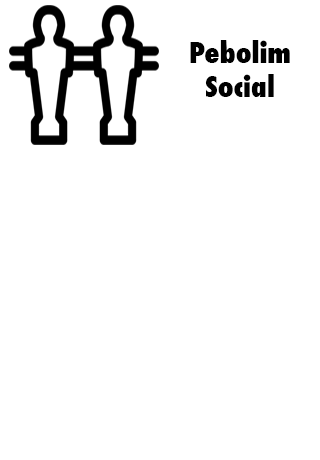
<style>
.page{position:relative;width:320px;height:460px;background:#ffffff}
.page>*{position:absolute;margin:0}
.t1{font:27.7px "Futura-CondensedExtraBold";color:#000000}
</style>
<div class="page">
<p class="t1" style="left:190px;top:40px;width:100px;height:57px;text-align:center">Pebolim<br>Social</p>
</div>
